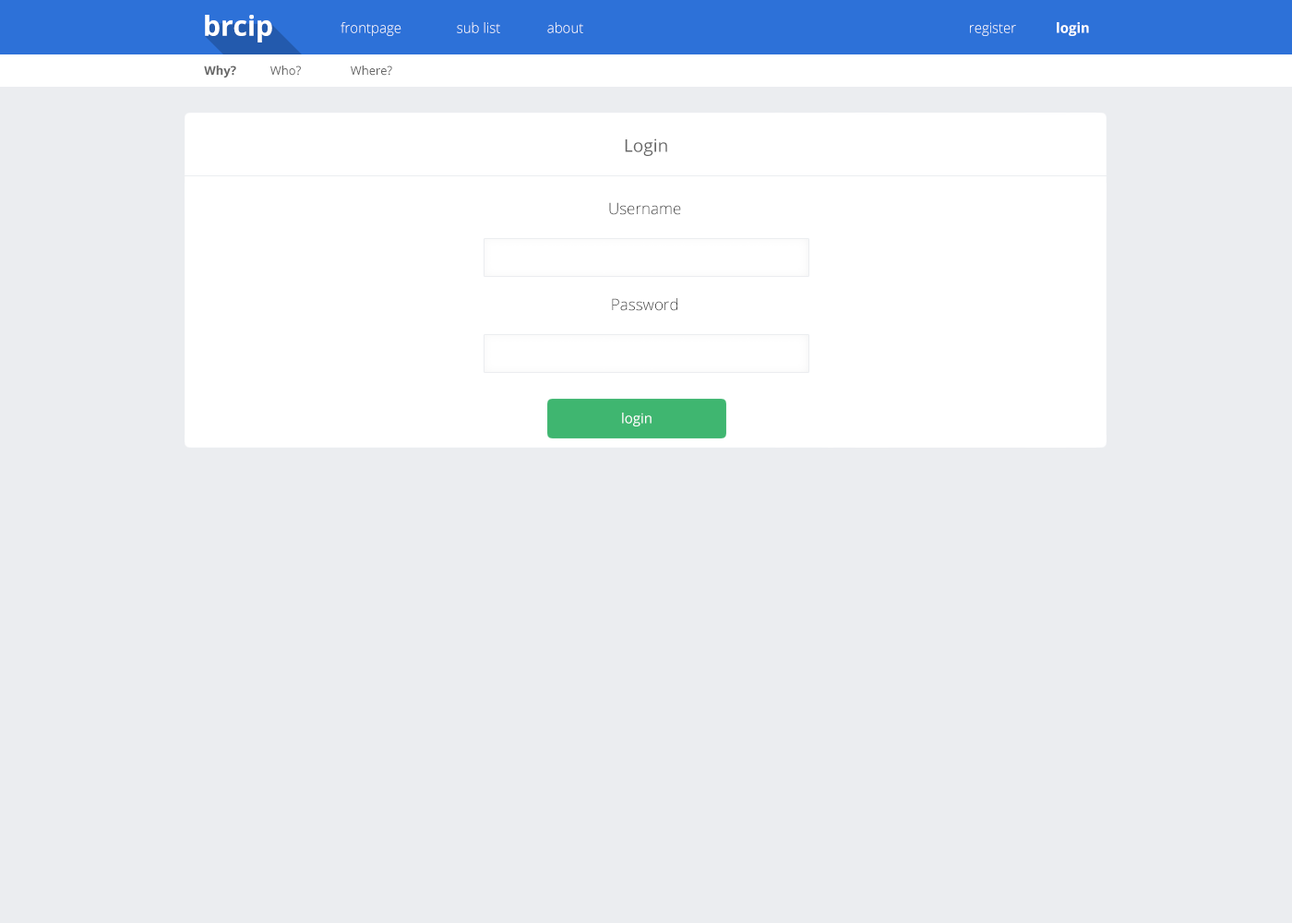
<style>
.page{position:relative;width:1292px;height:923px;background:#ebedf0}
.page>*{position:absolute;margin:0}
.t1{font:27.7px "OpenSans-Bold";color:#ffffff}
.t2{font:13.8px "OpenSans-Light"}
.t3{font:13.8px "OpenSans-Light";color:#ffffff}
.t4{font:13.8px "OpenSans-Bold";color:#ffffff}
.t5{font:12px "OpenSans-Bold";color:#666666}
.t6{font:12px "OpenSans";color:#666666}
.t7{font:17.5px "OpenSans";color:#666666}
.t8{font:15.7px "OpenSans-Light";color:#333333}
.t9{font:13.8px "OpenSans";color:#ffffff}
</style>
<div class="page">
<p class="t1" style="left:205px;top:15px;width:67px;height:27px">brcip</p>
<p class="t2" style="left:341px;top:22px;width:60px;height:14px">frontpage</p>
<p class="t2" style="left:457px;top:22px;width:43px;height:11px">sub list</p>
<p class="t3" style="left:547px;top:22px;width:36px;height:11px">about</p>
<p class="t3" style="left:970px;top:22px;width:46px;height:14px">register</p>
<p class="t4" style="left:1057px;top:22px;width:32px;height:14px">login</p>
<p class="t5" style="left:204px;top:66px;width:32px;height:12px">Why?</p>
<p class="t6" style="left:270px;top:66px;width:31px;height:10px">Who?</p>
<p class="t6" style="left:351px;top:66px;width:41px;height:10px">Where?</p>
<p class="t7" style="left:625px;top:138px;width:42px;height:18px">Login</p>
<p class="t8" style="left:609px;top:202px;width:72px;height:13px">Username</p>
<p class="t8" style="left:612px;top:298px;width:65px;height:13px">Password</p>
<p class="t9" style="left:622px;top:413px;width:30px;height:13px">login</p>
</div>
